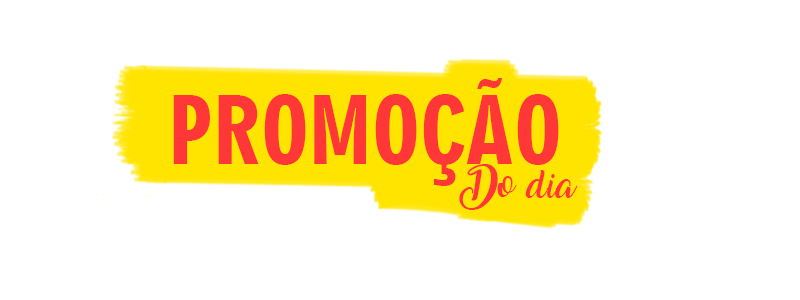
<style>
.page{position:relative;width:800px;height:300px;background:#ffffff}
.page>*{position:absolute;margin:0}
.t1{font:90px "Geometric706BT-BlackCondensedB";color:#ff3737}
.t2{font:25px "Amarillo";color:#ff3737}
</style>
<div class="page">
<p class="t1" style="left:173px;top:78px;width:386px;height:108px">PROMOÇÃO</p>
<p class="t2" style="left:459px;top:164px;width:119px;height:46px;text-align:center">Do dia</p>
</div>
